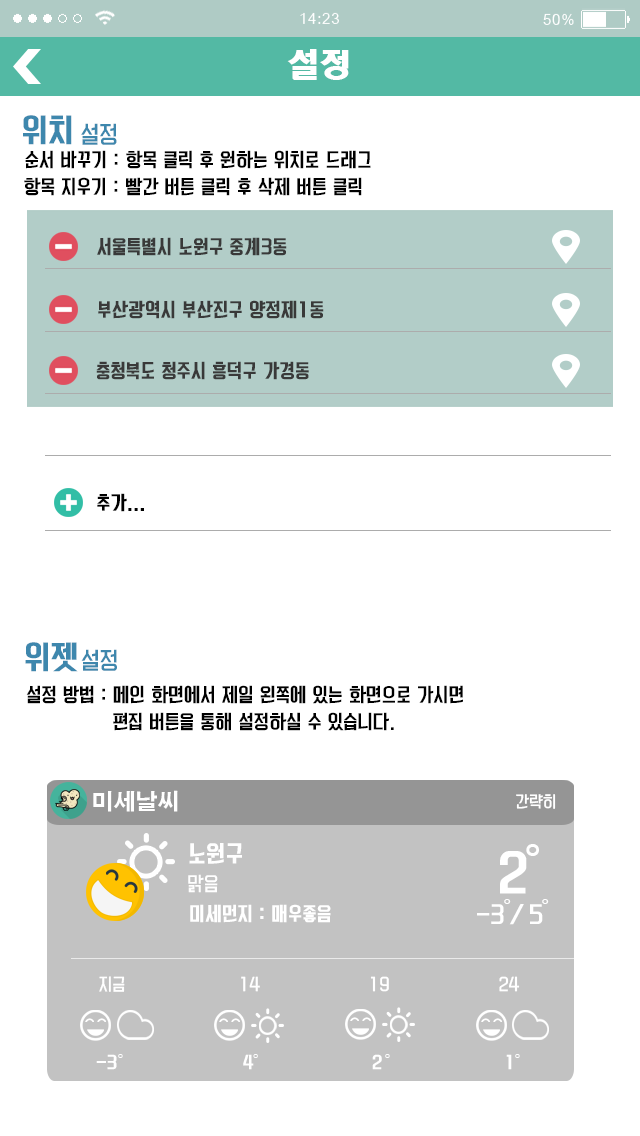
<style>
.page{position:relative;width:640px;height:1136px;background:#ffffff}
.page>*{position:absolute;margin:0}
.t1{font:32px "HeadlineR-HM";color:#ffffff}
.t2{font:30px "KoreanYNMYT-B";color:#3e87ad}
.t3{font:22px "KoreanYNMYT-L";color:#3e87ad}
.t4{font:18px "KoreanYNMYT-M";color:#000000}
.t5{font:18px "KoreanYNMYT-B";color:#393939}
.t6{font:18px "KoreanYNMYT-B";color:#000000}
.t7{font:18px/27px "KoreanYNMYT-M";color:#000000}
.t8{font:22px "H2gtrE";color:#ffffff}
.t9{font:15px "KoreanYNMYT-L";color:#ffffff}
.t10{font:21.9px "KoreanYNMYT-B";color:#ffffff}
.t11{font:47px "H2gtrE";color:#ffffff}
.t12{font:47px "KoreanYNMYT-B";color:#ffffff}
.t13{font:18px "KoreanYNMYT-L";color:#ffffff}
.t14{font:18px "KoreanYNMYT-B";color:#ffffff}
.t15{font:22px "KoreanYNMYT-M";color:#ffffff}
.t16{font:16px "KoreanYNMYT-L";color:#ffffff}
.t17{font:16px "KoreanYNMYT-B";color:#ffffff}
.t18{font:18px "Gulim";color:#ffffff}
</style>
<div class="page">
<p class="t1" style="left:287px;top:49px;width:62px;height:31px">설정</p>
<p class="t2" style="left:23px;top:115px;width:49px;height:30px">위치</p>
<p class="t3" style="left:81px;top:123px;width:36px;height:22px">설정</p>
<p class="t4" style="left:25px;top:150px;width:346px;height:19px">순서 바꾸기 : 항목 클릭 후 원하는 위치로 드래그</p>
<p class="t4" style="left:24px;top:177px;width:338px;height:19px">항목 지우기 : 빨간 버튼 클릭 후 삭제 버튼 클릭</p>
<p class="t5" style="left:97px;top:237px;width:190px;height:19px">서울특별시 노원구 중계3동</p>
<p class="t5" style="left:98px;top:300px;width:226px;height:19px">부산광역시 부산진구 양정제1동</p>
<p class="t5" style="left:96px;top:361px;width:213px;height:19px">충청북도 청주시 흥덕구 가경동</p>
<p class="t6" style="left:97px;top:493px;width:47px;height:19px">추가...</p>
<p class="t2" style="left:25px;top:642px;width:53px;height:30px">위젯</p>
<p class="t3" style="left:81px;top:649px;width:36px;height:22px">설정</p>
<p class="t7" style="left:26px;top:685px;width:437px;height:46px">설정 방법 : 메인 화면에서 제일 왼쪽에 있는 화면으로 가시면 <br>               편집 버튼을 통해 설정하실 수 있습니다.</p>
<p class="t8" style="left:93px;top:790px;width:85px;height:22px">미세날씨</p>
<p class="t9" style="left:516px;top:794px;width:40px;height:15px">간략히</p>
<p class="t10" style="left:189px;top:843px;width:53px;height:21px">노원구</p>
<p class="t11" style="left:526px;top:844px;width:13px;height:12px">。</p>
<p class="t12" style="left:500px;top:851px;width:27px;height:43px">2</p>
<p class="t13" style="left:188px;top:874px;width:30px;height:19px">맑음</p>
<p class="t14" style="left:190px;top:904px;width:141px;height:19px">미세먼지 : 매우좋음</p>
<p class="t15" style="left:477px;top:904px;width:66px;height:21px">-3 / 5</p>
<p class="t8" style="left:504px;top:899px;width:7px;height:5px">。</p>
<p class="t8" style="left:542px;top:899px;width:7px;height:5px">。</p>
<p class="t16" style="left:99px;top:976px;width:421px;height:16px">지금                      14                     19                    24</p>
<p class="t17" style="left:96px;top:1054px;width:416px;height:16px">-3                        4                      2                       1</p>
<p class="t18" style="left:118px;top:1054px;width:402px;height:4px">。                    。                    。                   。</p>
</div>
